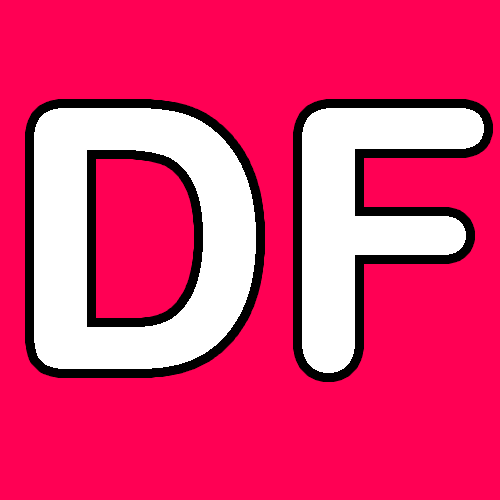
<style>
.page{position:relative;width:500px;height:500px;background:#ff0054}
.page>*{position:absolute;margin:0}
.t1{font:364.2px "ArialRoundedMTBold";color:#ffffff}
</style>
<div class="page">
<p class="t1" style="left:34px;top:108px;width:450px;height:265px">DF</p>
</div>
